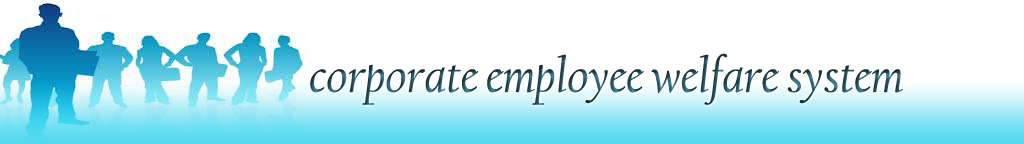
<style>
.page{position:relative;width:1024px;height:144px;background:#ffffff}
.page>*{position:absolute;margin:0}
.t1{font:50px "CalifornianFB-Italic"}
</style>
<div class="page">
<p class="t1" style="left:310px;top:53px;width:593px;height:52px">corporate employee welfare system</p>
</div>
